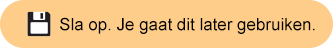
<style>
.page{position:relative;width:333px;height:48px;background:#fecd8a}
.page>*{position:absolute;margin:0}
.t1{font:16.9px "ArialMT";color:#000000}
</style>
<div class="page">
<p class="t1" style="left:60px;top:17px;width:255px;height:17px">Sla op. Je gaat dit later gebruiken.</p>
</div>
